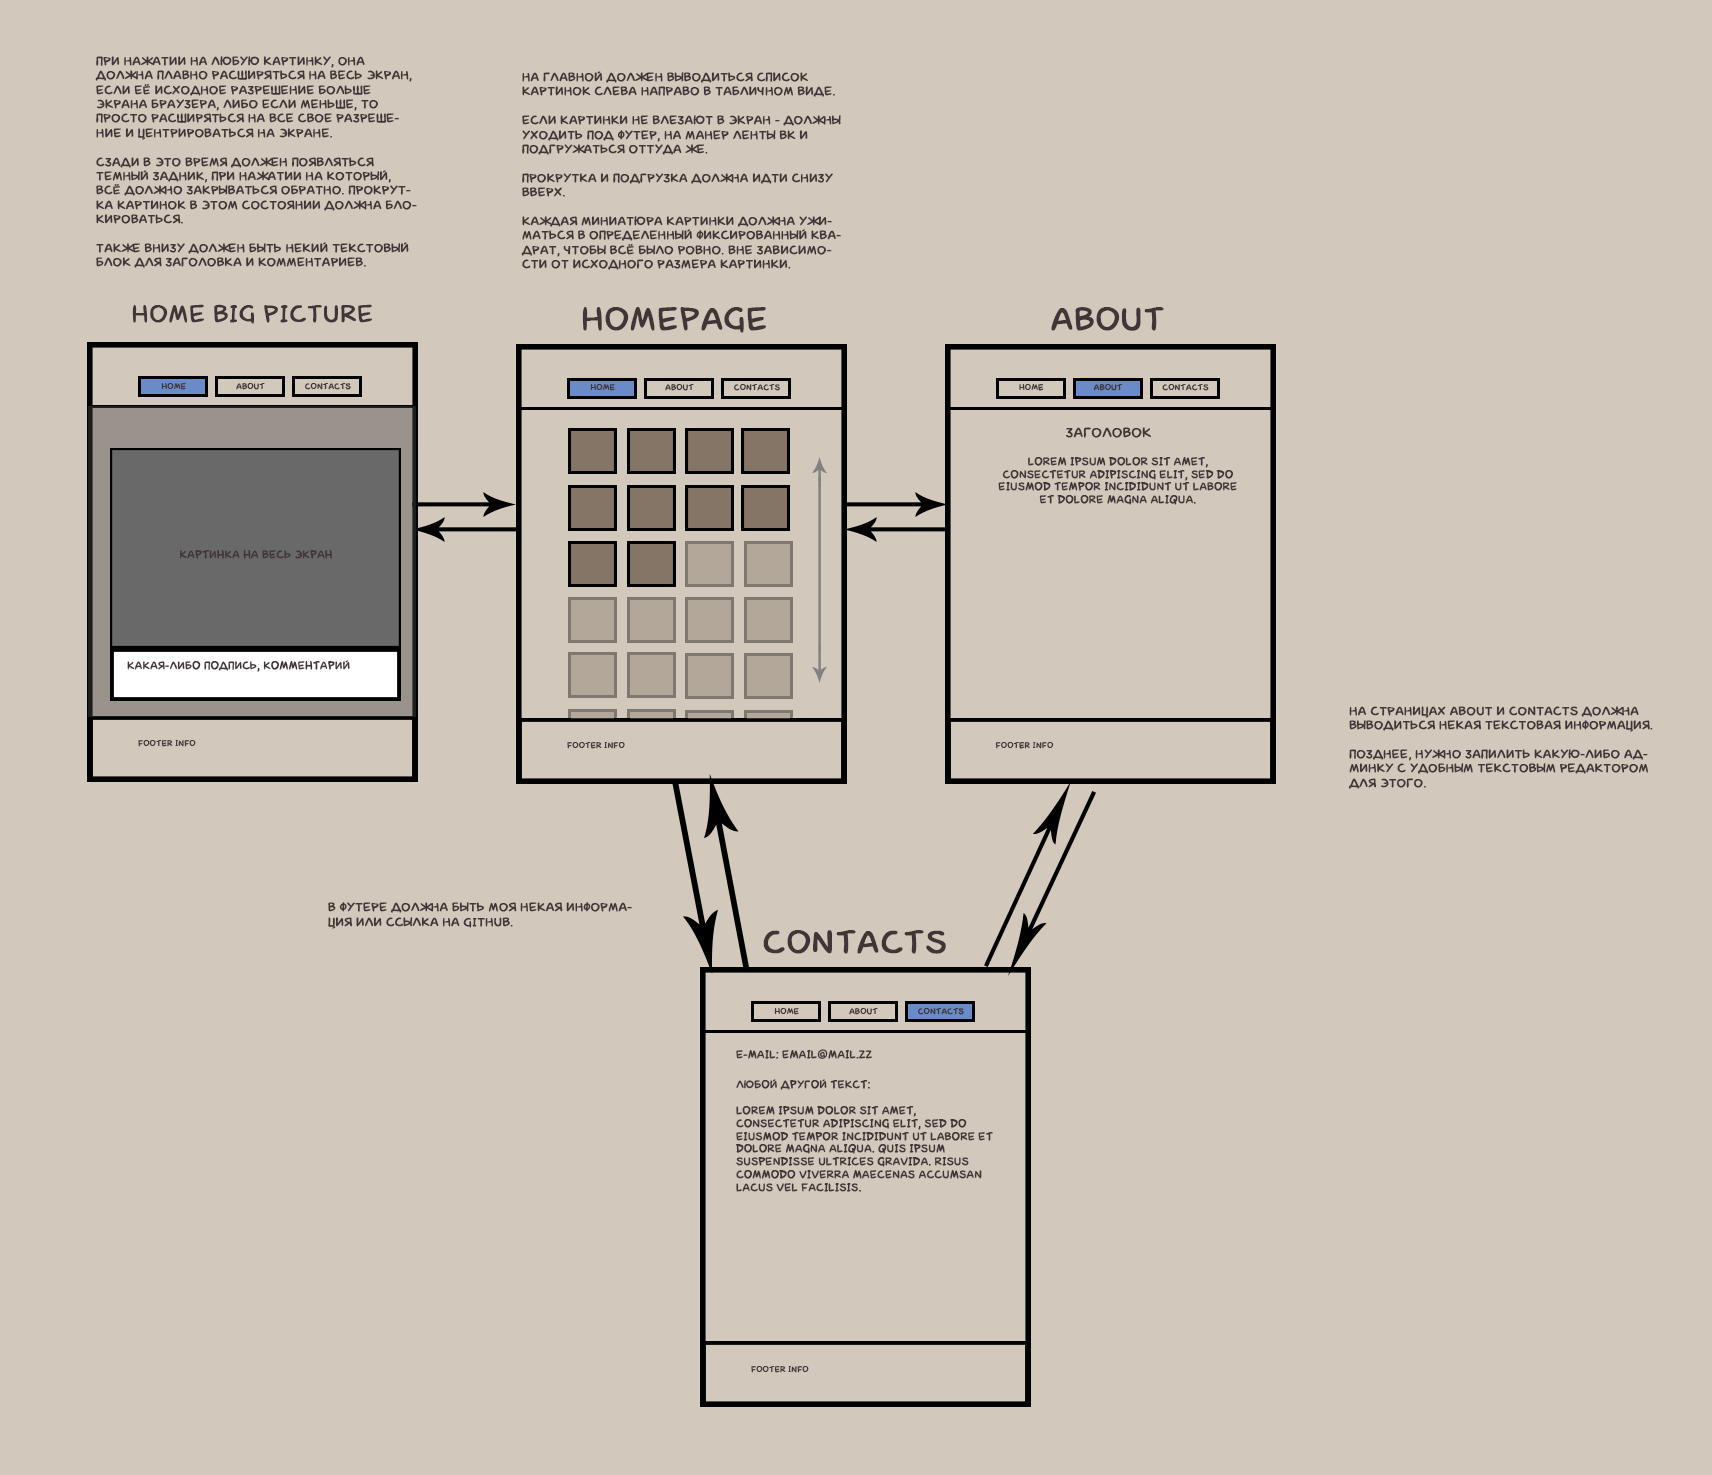
<style>
.page{position:relative;width:1712px;height:1475px;background:#d2c8bb}
.page>*{position:absolute;margin:0}
.t1{font:12px "laCartoonerie";color:#413538;text-transform:uppercase;font-weight:bold}
.t2{font:24px "laCartoonerie";color:#413538;text-transform:uppercase;font-weight:bold}
.t3{font:32px "laCartoonerie";color:#413538;text-transform:uppercase;font-weight:bold}
.t4{font:8px "laCartoonerie";color:#413538;text-transform:uppercase;font-weight:bold}
.t5{font:13.3px "laCartoonerie";color:#413538;text-transform:uppercase;font-weight:bold}
.t6{font:10.7px "laCartoonerie";color:#413538;text-transform:uppercase;font-weight:bold}
</style>
<div class="page">
<p class="t1" style="left:95px;top:56px;width:322px;height:212px">при нажатии на любую картинку, она должна плавно расширяться на весь экран, если её исходное разрешение больше экрана браузера, либо если меньше, то просто расширяться на все свое разрешение и центрироваться на экране.<br><br>сзади в это время должен появляться темный задник, при нажатии на который, всё должно закрываться обратно. прокрутка картинок в этом состоянии должна блокироваться.<br><br>также внизу должен быть некий текстовый блок для заголовка и комментариев.</p>
<p class="t1" style="left:521px;top:71px;width:320px;height:199px">На главной должен выводиться список картинок слева направо в табличном виде.<br><br>если картинки не влезают в экран - должны уходить под футер, на манер ленты вк и подгружаться оттуда же.<br><br>прокрутка и подгрузка должна идти снизу вверх.<br><br>каждая миниатюра картинки должна ужиматься в определенный фиксированный квадрат, чтобы всё было ровно. вне зависимости от исходного размера картинки.</p>
<p class="t2" style="left:132px;top:304px;width:240px;height:20px">HOME BIG PICTURE</p>
<p class="t3" style="left:582px;top:307px;width:184px;height:26px">HOMEPAGE</p>
<p class="t3" style="left:1051px;top:307px;width:113px;height:24px">ABOUT</p>
<p class="t4" style="left:161px;top:383px;width:25px;height:7px">home</p>
<p class="t4" style="left:236px;top:383px;width:29px;height:7px">about</p>
<p class="t4" style="left:305px;top:383px;width:46px;height:7px">contacts</p>
<p class="t4" style="left:590px;top:384px;width:25px;height:7px">home</p>
<p class="t4" style="left:665px;top:384px;width:29px;height:7px">about</p>
<p class="t4" style="left:734px;top:384px;width:46px;height:7px">contacts</p>
<p class="t4" style="left:1019px;top:384px;width:25px;height:7px">home</p>
<p class="t4" style="left:1093px;top:384px;width:29px;height:7px">about</p>
<p class="t4" style="left:1162px;top:384px;width:47px;height:7px">contacts</p>
<p class="t5" style="left:1066px;top:427px;width:85px;height:11px">Заголовок</p>
<p class="t6" style="left:998px;top:457px;width:239px;height:48px;text-align:center">Lorem ipsum dolor sit amet, consectetur adipiscing elit, sed do eiusmod tempor incididunt ut labore et dolore magna aliqua.</p>
<p class="t6" style="left:180px;top:550px;width:152px;height:9px">картинка на весь экран</p>
<p class="t6" style="left:127px;top:660px;width:223px;height:12px">какая-либо подпись, комментарий</p>
<p class="t1" style="left:1348px;top:706px;width:305px;height:83px">на страницах about и contacts должна выводиться некая текстовая информация.<br><br>позднее, нужно запилить какую-либо админку с удобным текстовым редактором для этого.</p>
<p class="t4" style="left:138px;top:740px;width:58px;height:7px">footer info</p>
<p class="t4" style="left:567px;top:742px;width:58px;height:7px">footer info</p>
<p class="t4" style="left:995px;top:742px;width:59px;height:7px">footer info</p>
<p class="t1" style="left:328px;top:902px;width:304px;height:27px">в футере должна быть моя некая информация или ссылка на github.</p>
<p class="t3" style="left:763px;top:930px;width:183px;height:24px">CONTACTS</p>
<p class="t4" style="left:774px;top:1008px;width:25px;height:7px">home</p>
<p class="t4" style="left:849px;top:1008px;width:29px;height:7px">about</p>
<p class="t4" style="left:918px;top:1008px;width:46px;height:7px">contacts</p>
<p class="t6" style="left:736px;top:1049px;width:136px;height:10px">e-mail: email@mail.zz</p>
<p class="t6" style="left:736px;top:1079px;width:257px;height:113px">любой другой текст:<br><br>Lorem ipsum dolor sit amet, consectetur adipiscing elit, sed do eiusmod tempor incididunt ut labore et dolore magna aliqua. Quis ipsum suspendisse ultrices gravida. Risus commodo viverra maecenas accumsan lacus vel facilisis.</p>
<p class="t4" style="left:751px;top:1366px;width:58px;height:7px">footer info</p>
</div>
